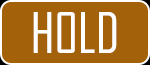
<style>
.page{position:relative;width:150px;height:65px;background:#a36209}
.page>*{position:absolute;margin:0}
.t1{font:53.3px "AgencyFB-Reg";color:#ffffff}
</style>
<div class="page">
<p class="t1" style="left:33px;top:12px;width:84px;height:41px">HOLD</p>
</div>
